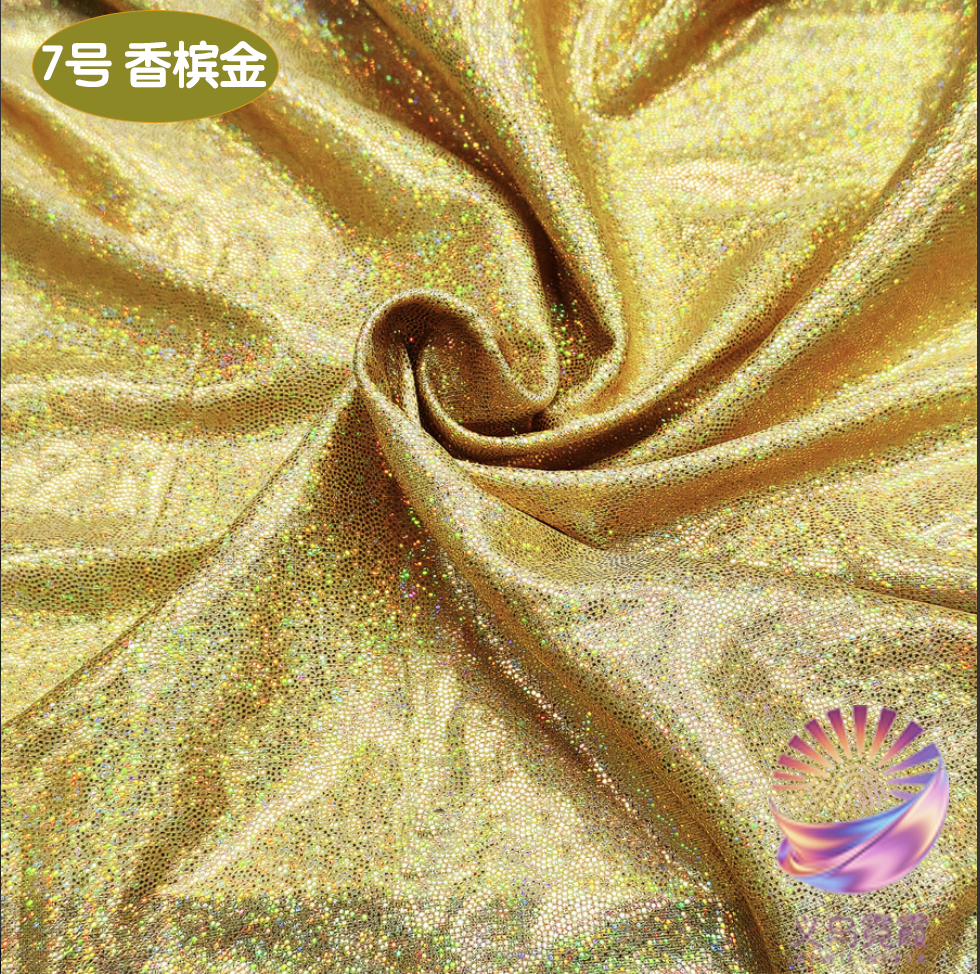
<style>
.page{position:relative;width:980px;height:974px}
.page>*{position:absolute;margin:0}
.t1{font:49.1px "STYuanti-SC-Bold";color:#ffffff;scale:0.97 1}
.t2{font:84.6px "STBaoliSC-Regular";color:#ffffff;scale:0.97 1}
</style>
<div class="page">
<p class="t1" style="left:42px;top:40px;width:225px;height:49px"><span class="t2">         </span>7号 香槟金</p>
</div>
